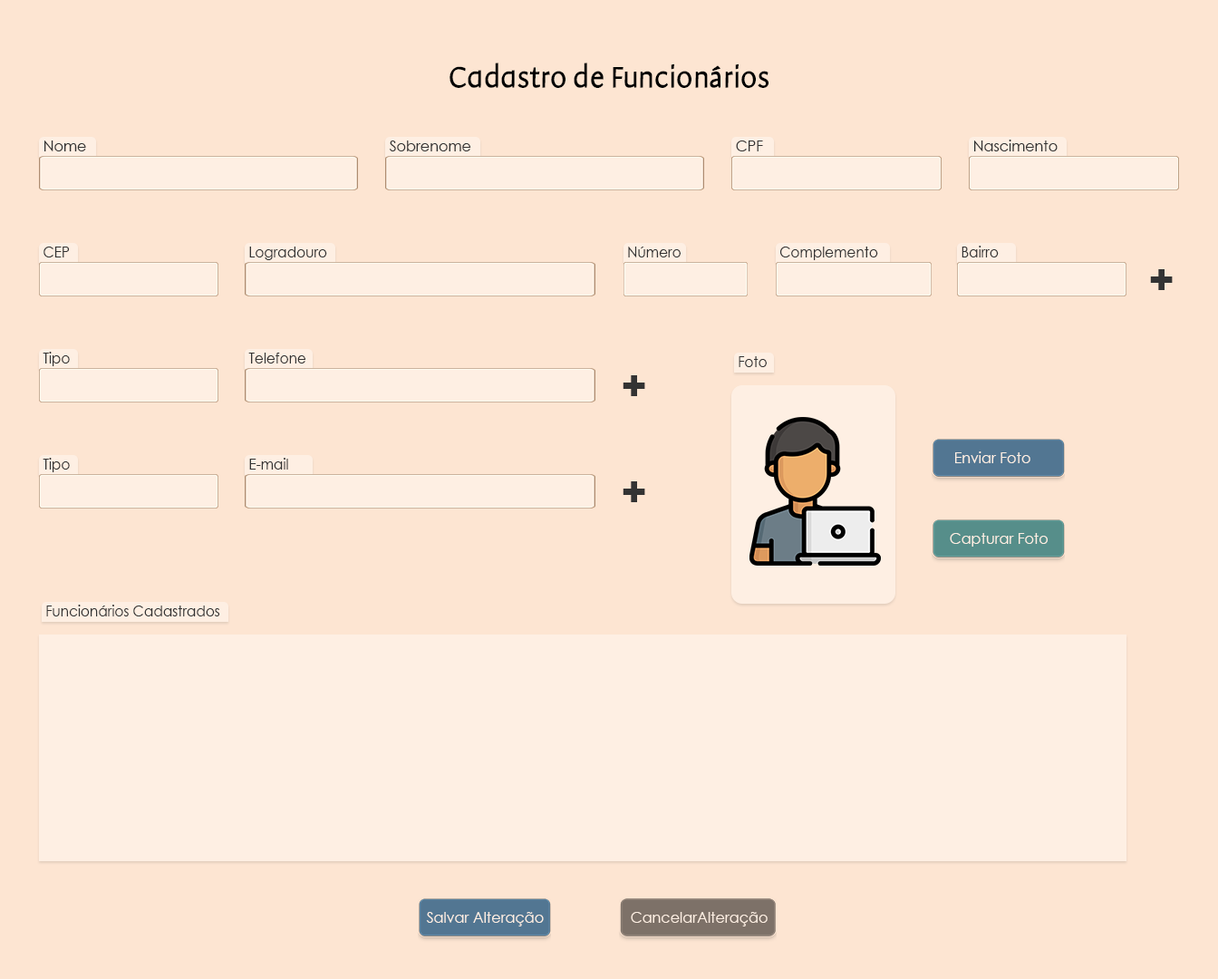
<style>
.page{position:relative;width:1218px;height:979px;background:#fde5d2}
.page>*{position:absolute;margin:0}
.t1{font:31.7px "Amira-Light";color:#000000}
.t2{font:14.5px "AvantGardeBook";color:#333333}
.t3{font:14.5px "AvantGardeBook";color:#333333;scale:0.95 1}
.t4{font:36.3px "AlbertusExtraBoldW1";color:#333333}
.t5{font:14.5px "AvantGardeBook";color:#feefe3}
</style>
<div class="page">
<p class="t1" style="left:450px;top:63px;width:319px;height:25px">Cadastro de Funcionários</p>
<p class="t2" style="left:44px;top:140px;width:42px;height:11px">Nome</p>
<p class="t2" style="left:389px;top:140px;width:82px;height:11px">Sobrenome</p>
<p class="t2" style="left:736px;top:140px;width:27px;height:11px">CPF</p>
<p class="t2" style="left:974px;top:140px;width:84px;height:11px">Nascimento</p>
<p class="t3" style="left:962px;top:246px;width:37px;height:11px">Bairro</p>
<p class="t3" style="left:44px;top:247px;width:26px;height:10px">CEP</p>
<p class="t3" style="left:249px;top:247px;width:78px;height:13px">Logradouro</p>
<p class="t3" style="left:628px;top:247px;width:53px;height:10px">Número</p>
<p class="t3" style="left:780px;top:247px;width:98px;height:13px">Complemento</p>
<p class="t4" style="left:1150px;top:269px;width:23px;height:21px">+</p>
<p class="t3" style="left:43px;top:352px;width:27px;height:14px">Tipo</p>
<p class="t3" style="left:248px;top:353px;width:57px;height:10px">Telefone</p>
<p class="t3" style="left:739px;top:356px;width:28px;height:11px">Foto</p>
<p class="t4" style="left:623px;top:375px;width:22px;height:21px">+</p>
<p class="t3" style="left:43px;top:458px;width:27px;height:14px">Tipo</p>
<p class="t3" style="left:249px;top:458px;width:39px;height:11px">E-mail</p>
<p class="t5" style="left:955px;top:451px;width:76px;height:12px">Enviar Foto</p>
<p class="t4" style="left:623px;top:481px;width:22px;height:21px">+</p>
<p class="t5" style="left:950px;top:533px;width:98px;height:14px">Capturar Foto</p>
<p class="t3" style="left:46px;top:605px;width:174px;height:11px">Funcionários Cadastrados</p>
<p class="t5" style="left:426px;top:912px;width:118px;height:14px">Salvar Alteração</p>
<p class="t5" style="left:631px;top:912px;width:137px;height:14px">CancelarAlteração</p>
</div>
